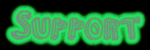
<style>
.page{position:relative;width:150px;height:50px;background:#000000}
.page>*{position:absolute;margin:0}
.t1{font:30px "NKOTBFever";color:#837e8f}
</style>
<div class="page">
<p class="t1" style="left:11px;top:11px;width:129px;height:29px">Support</p>
<p class="t1" style="left:11px;top:11px;width:129px;height:29px">Support</p>
<p class="t1" style="left:11px;top:11px;width:129px;height:29px">Support</p>
</div>
